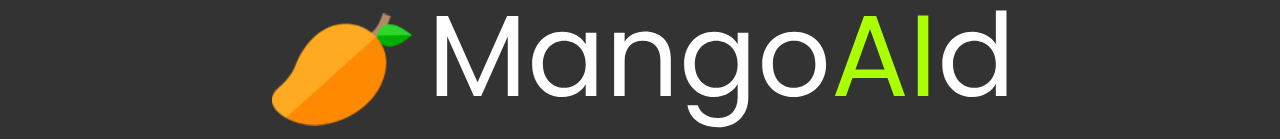
<style>
.page{position:relative;width:1280px;height:139px;background:#333333}
.page>*{position:absolute;margin:0}
.t1{font:115.5px "Poppins-Regular";color:#ffffff}
.t2{font:115.5px "Poppins-Regular";color:#aaff00}
</style>
<div class="page">
<p class="t1" style="left:436px;top:10px;width:571px;height:118px">Mango<span class="t2">AI</span>d</p>
</div>
